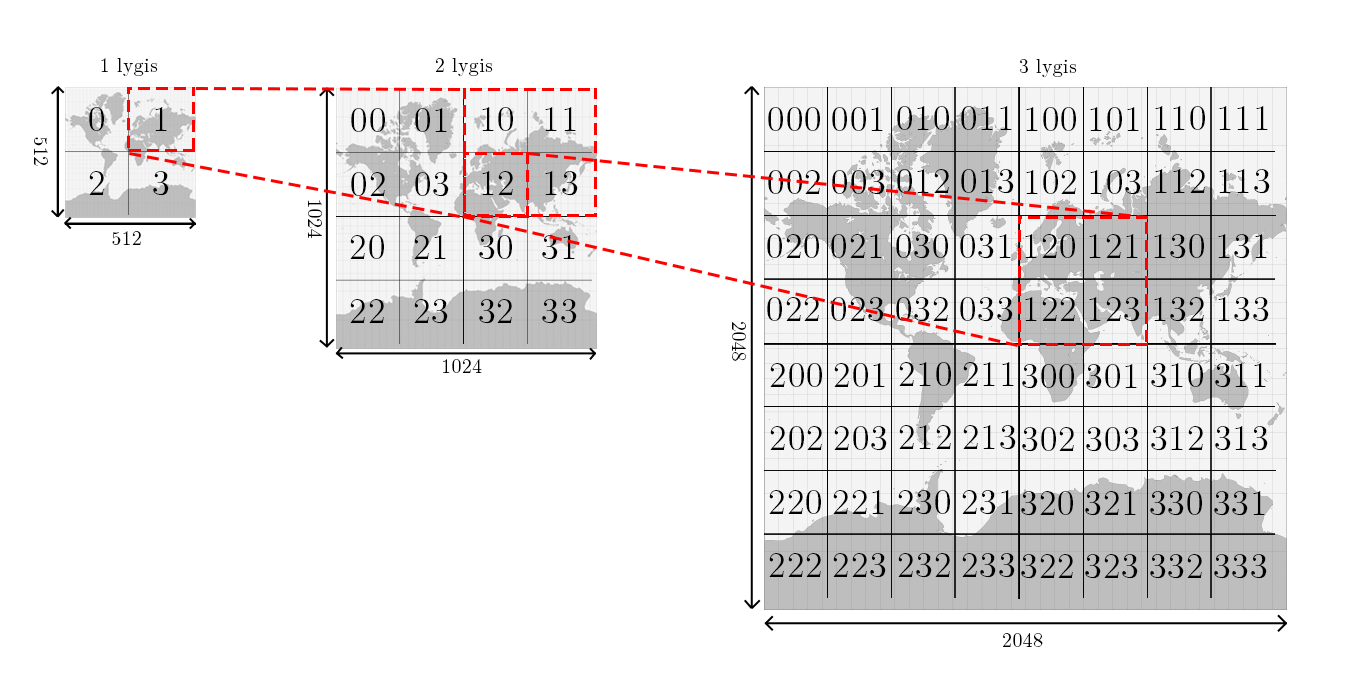
<style>
.page{position:relative;width:1356px;height:689px;background:#ffffff}
.page>*{position:absolute;margin:0}
.t1{font:20px "LMRoman12-Regular";letter-spacing:0.025em;color:#000000}
.t2{font:36px "LMRoman12-Regular";letter-spacing:0.025em;color:#000000}
.t3{font:35.9px "LMRoman12-Regular";letter-spacing:0.025em;color:#000000}
</style>
<div class="page">
<p class="t1" style="left:101px;top:58px;width:57px;height:19px">1 lygis</p>
<p class="t1" style="left:435px;top:58px;width:58px;height:19px">2 lygis</p>
<p class="t1" style="left:1019px;top:59px;width:58px;height:19px">3 lygis</p>
<p class="t2" style="left:89px;top:107px;width:15px;height:24px">0</p>
<p class="t2" style="left:155px;top:107px;width:12px;height:24px">1</p>
<p class="t3" style="left:351px;top:108px;width:34px;height:24px">00</p>
<p class="t3" style="left:415px;top:108px;width:32px;height:24px">01</p>
<p class="t3" style="left:482px;top:107px;width:31px;height:24px">10</p>
<p class="t3" style="left:545px;top:107px;width:31px;height:24px">11</p>
<p class="t3" style="left:768px;top:107px;width:52px;height:24px">000</p>
<p class="t3" style="left:832px;top:107px;width:51px;height:24px">001</p>
<p class="t3" style="left:897px;top:106px;width:52px;height:24px">010</p>
<p class="t3" style="left:961px;top:106px;width:51px;height:24px">011</p>
<p class="t3" style="left:1026px;top:107px;width:50px;height:24px">100</p>
<p class="t3" style="left:1090px;top:107px;width:49px;height:24px">101</p>
<p class="t3" style="left:1155px;top:106px;width:50px;height:24px">110</p>
<p class="t3" style="left:1219px;top:106px;width:49px;height:24px">111</p>
<p class="t1" style="left:34px;top:137px;width:14px;height:29px;rotate:90deg">512</p>
<p class="t2" style="left:89px;top:171px;width:15px;height:24px">2</p>
<p class="t2" style="left:153px;top:171px;width:16px;height:25px">3</p>
<p class="t3" style="left:351px;top:172px;width:34px;height:24px">02</p>
<p class="t3" style="left:415px;top:172px;width:34px;height:25px">03</p>
<p class="t3" style="left:482px;top:171px;width:31px;height:24px">12</p>
<p class="t3" style="left:545px;top:171px;width:33px;height:25px">13</p>
<p class="t3" style="left:768px;top:170px;width:52px;height:24px">002</p>
<p class="t3" style="left:832px;top:170px;width:53px;height:25px">003</p>
<p class="t3" style="left:897px;top:169px;width:52px;height:24px">012</p>
<p class="t3" style="left:961px;top:169px;width:53px;height:25px">013</p>
<p class="t3" style="left:1026px;top:170px;width:50px;height:24px">102</p>
<p class="t3" style="left:1090px;top:170px;width:51px;height:25px">103</p>
<p class="t3" style="left:1155px;top:169px;width:50px;height:24px">112</p>
<p class="t3" style="left:1219px;top:169px;width:51px;height:25px">113</p>
<p class="t1" style="left:308px;top:200px;width:14px;height:38px;rotate:90deg">1024</p>
<p class="t1" style="left:112px;top:231px;width:29px;height:14px">512</p>
<p class="t3" style="left:350px;top:235px;width:34px;height:24px">20</p>
<p class="t3" style="left:414px;top:235px;width:32px;height:24px">21</p>
<p class="t3" style="left:479px;top:235px;width:33px;height:25px">30</p>
<p class="t3" style="left:542px;top:235px;width:33px;height:25px">31</p>
<p class="t3" style="left:767px;top:234px;width:52px;height:24px">020</p>
<p class="t3" style="left:831px;top:234px;width:51px;height:24px">021</p>
<p class="t3" style="left:896px;top:234px;width:52px;height:25px">030</p>
<p class="t3" style="left:960px;top:234px;width:51px;height:25px">031</p>
<p class="t3" style="left:1025px;top:234px;width:50px;height:24px">120</p>
<p class="t3" style="left:1089px;top:234px;width:49px;height:24px">121</p>
<p class="t3" style="left:1154px;top:234px;width:50px;height:25px">130</p>
<p class="t3" style="left:1218px;top:234px;width:49px;height:25px">131</p>
<p class="t3" style="left:350px;top:299px;width:34px;height:24px">22</p>
<p class="t3" style="left:414px;top:299px;width:34px;height:25px">23</p>
<p class="t3" style="left:479px;top:299px;width:33px;height:25px">32</p>
<p class="t3" style="left:542px;top:299px;width:35px;height:25px">33</p>
<p class="t3" style="left:767px;top:297px;width:52px;height:24px">022</p>
<p class="t3" style="left:831px;top:297px;width:53px;height:25px">023</p>
<p class="t3" style="left:896px;top:297px;width:52px;height:25px">032</p>
<p class="t3" style="left:960px;top:297px;width:53px;height:25px">033</p>
<p class="t3" style="left:1025px;top:297px;width:50px;height:24px">122</p>
<p class="t3" style="left:1089px;top:297px;width:51px;height:25px">123</p>
<p class="t3" style="left:1154px;top:297px;width:50px;height:25px">132</p>
<p class="t3" style="left:1218px;top:297px;width:51px;height:25px">133</p>
<p class="t1" style="left:732px;top:322px;width:14px;height:39px;rotate:90deg">2048</p>
<p class="t1" style="left:443px;top:359px;width:39px;height:14px">1024</p>
<p class="t3" style="left:770px;top:363px;width:52px;height:24px">200</p>
<p class="t3" style="left:834px;top:363px;width:51px;height:24px">201</p>
<p class="t3" style="left:899px;top:362px;width:52px;height:24px">210</p>
<p class="t3" style="left:963px;top:362px;width:51px;height:24px">211</p>
<p class="t3" style="left:1022px;top:364px;width:52px;height:25px">300</p>
<p class="t3" style="left:1086px;top:364px;width:51px;height:25px">301</p>
<p class="t3" style="left:1151px;top:363px;width:52px;height:25px">310</p>
<p class="t3" style="left:1215px;top:363px;width:51px;height:25px">311</p>
<p class="t3" style="left:899px;top:425px;width:52px;height:24px">212</p>
<p class="t3" style="left:963px;top:425px;width:53px;height:25px">213</p>
<p class="t3" style="left:770px;top:426px;width:52px;height:24px">202</p>
<p class="t3" style="left:834px;top:426px;width:53px;height:25px">203</p>
<p class="t3" style="left:1022px;top:427px;width:52px;height:25px">302</p>
<p class="t3" style="left:1086px;top:427px;width:53px;height:25px">303</p>
<p class="t3" style="left:1151px;top:426px;width:52px;height:25px">312</p>
<p class="t3" style="left:1215px;top:426px;width:53px;height:25px">313</p>
<p class="t3" style="left:769px;top:490px;width:52px;height:24px">220</p>
<p class="t3" style="left:833px;top:490px;width:51px;height:24px">221</p>
<p class="t3" style="left:898px;top:490px;width:52px;height:25px">230</p>
<p class="t3" style="left:962px;top:490px;width:51px;height:25px">231</p>
<p class="t3" style="left:1021px;top:491px;width:52px;height:25px">320</p>
<p class="t3" style="left:1085px;top:491px;width:51px;height:25px">321</p>
<p class="t3" style="left:1150px;top:491px;width:52px;height:25px">330</p>
<p class="t3" style="left:1214px;top:491px;width:51px;height:25px">331</p>
<p class="t3" style="left:769px;top:553px;width:52px;height:24px">222</p>
<p class="t3" style="left:833px;top:553px;width:53px;height:25px">223</p>
<p class="t3" style="left:898px;top:553px;width:52px;height:25px">232</p>
<p class="t3" style="left:962px;top:553px;width:53px;height:25px">233</p>
<p class="t3" style="left:1021px;top:554px;width:52px;height:25px">322</p>
<p class="t3" style="left:1085px;top:554px;width:53px;height:25px">323</p>
<p class="t3" style="left:1150px;top:554px;width:52px;height:25px">332</p>
<p class="t3" style="left:1214px;top:554px;width:53px;height:25px">333</p>
<p class="t1" style="left:1003px;top:633px;width:40px;height:14px">2048</p>
</div>
